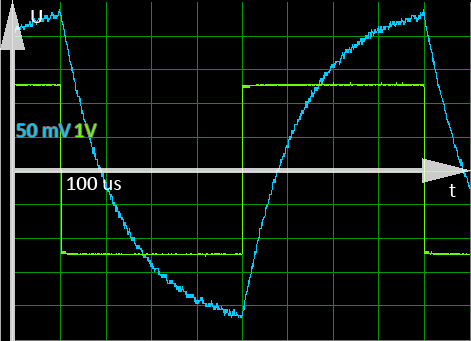
<style>
.page{position:relative;width:471px;height:341px;background:#000000}
.page>*{position:absolute;margin:0}
.t1{font:36px "Calibri";color:#ffffff}
.t2{font:36px "Calibri";color:#00ccff}
.t3{font:36px "Calibri";color:#66ff00}
</style>
<div class="page">
<p class="t1" style="left:31px;top:10px;width:11px;height:13px">U</p>
<p class="t2" style="left:17px;top:124px;width:54px;height:13px">50 mV</p>
<p class="t3" style="left:75px;top:124px;width:22px;height:13px">1V</p>
<p class="t1" style="left:67px;top:177px;width:54px;height:13px">100 us</p>
<p class="t1" style="left:449px;top:184px;width:7px;height:13px">t</p>
</div>
